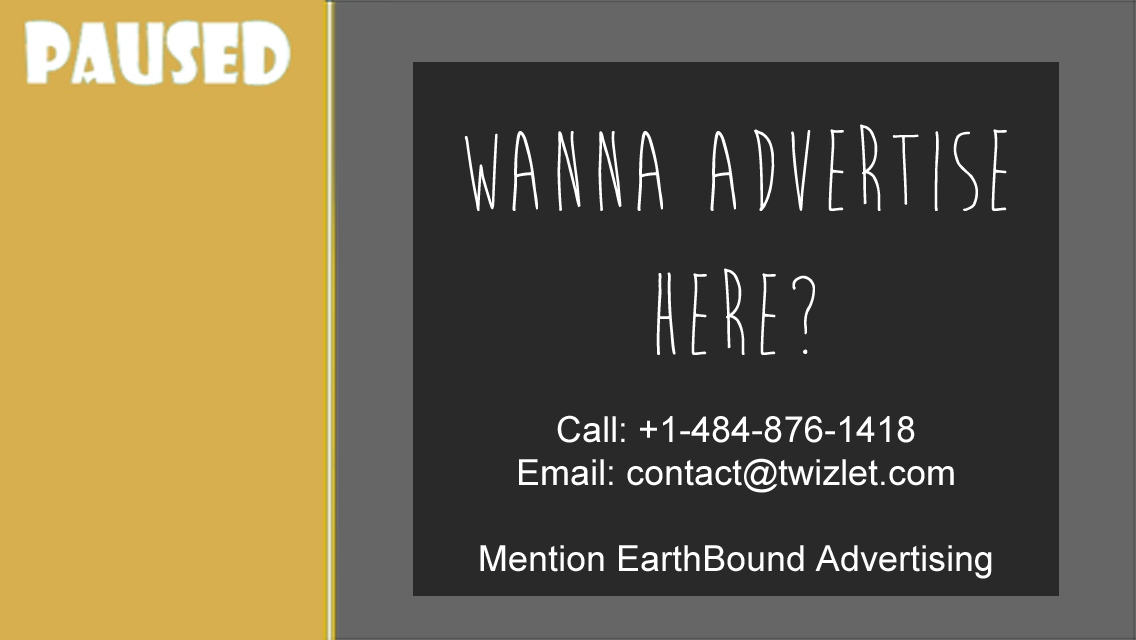
<style>
.page{position:relative;width:1136px;height:640px;background:#292929}
.page>*{position:absolute;margin:0}
.t1{font:36px "ArialMT";color:#ffffff}
.t2{font:8px "BrainFlower";color:#ffffff}
.t3{font:120px "BrainFlower";color:#ffffff}
</style>
<div class="page">
<p class="t1" style="left:464px;top:124px;width:543px;height:455px;text-align:center"><span class="t2"><br></span><span class="t3">wanna Advertise<br>Here?</span><br><br>Call: +1-484-876-1418<br>Email: contact@twizlet.com<br><br>Mention EarthBound Advertising</p>
</div>
